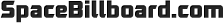
<style>
.page{position:relative;width:224px;height:25px;background:#ffffff}
.page>*{position:absolute;margin:0}
.t1{font:24px "RobofanFree";letter-spacing:0.005em;color:#252525}
</style>
<div class="page">
<p class="t1" style="left:0px;top:0px;width:223px;height:23px">SpaceBillboard.com</p>
</div>
